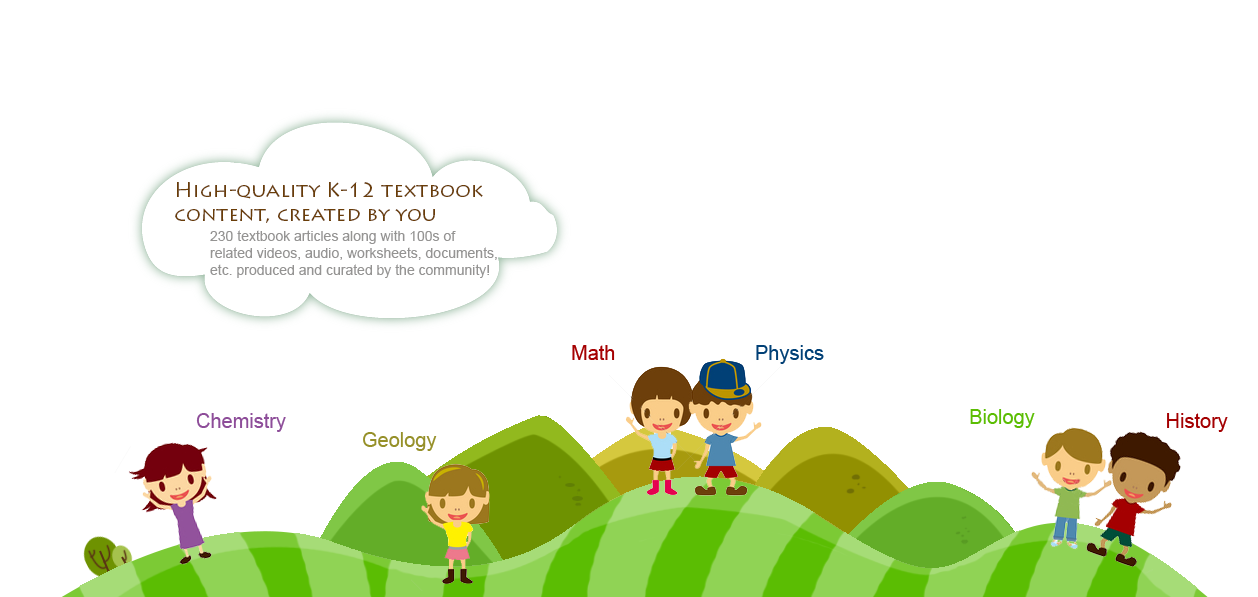
<style>
.page{position:relative;width:1258px;height:597px;background:#ffffff}
.page>*{position:absolute;margin:0}
.t1{font:20px "LithosPro-Regular";color:#6a3d08}
.t2{font:14px "ArialMT";color:#959493}
.t3{font:20px "ArialMT";color:#a50102}
.t4{font:20px "ArialMT";color:#014076}
.t5{font:20px "ArialMT";color:#8d4d99}
.t6{font:20px "ArialMT";color:#5bbd03}
.t7{font:20px "ArialMT";color:#a40001}
.t8{font:20px "ArialMT";color:#969029}
</style>
<div class="page">
<p class="t1" style="left:175px;top:182px;width:308px;height:41px">High-quality K-12 textbook<br>content, created by you</p>
<p class="t2" style="left:210px;top:230px;width:287px;height:48px">230 textbook articles along with 100s of <br>related videos, audio, worksheets, documents, <br>etc. produced and curated by the community!</p>
<p class="t3" style="left:572px;top:345px;width:43px;height:15px">Math</p>
<p class="t4" style="left:756px;top:345px;width:68px;height:19px">Physics</p>
<p class="t5" style="left:196px;top:413px;width:90px;height:19px">Chemistry</p>
<p class="t6" style="left:970px;top:409px;width:65px;height:19px">Biology</p>
<p class="t7" style="left:1167px;top:413px;width:61px;height:19px">History</p>
<p class="t8" style="left:363px;top:432px;width:74px;height:19px">Geology</p>
</div>
